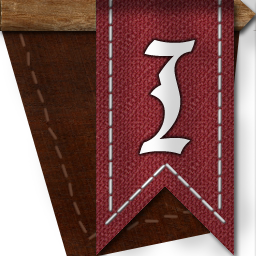
<style>
.page{position:relative;width:256px;height:256px}
.page>*{position:absolute;margin:0}
.t1{font:150px "LucidaBlackletter";color:#dadada}
</style>
<div class="page">
<p class="t1" style="left:139px;top:40px;width:56px;height:114px">I</p>
</div>
